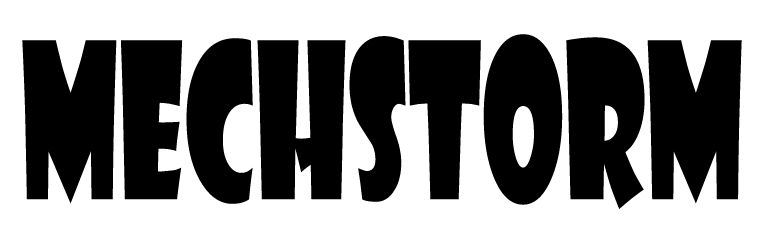
<style>
.page{position:relative;width:766px;height:236px;background:#ffffff}
.page>*{position:absolute;margin:0}
.t1{font:211.7px "ShowcardGothic-Reg";color:#000000;scale:0.56 1}
</style>
<div class="page">
<p class="t1" style="left:22px;top:34px;width:720px;height:175px">MechStORM</p>
</div>
